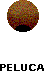
<style>
.page{position:relative;width:45px;height:71px;background:#ffffff}
.page>*{position:absolute;margin:0}
.t1{font:10.3px "Arial-BoldMT";color:#000000;scale:1.11 1}
</style>
<div class="page">
<p class="t1" style="left:0px;top:64px;width:44px;height:7px">PELUCA</p>
</div>
